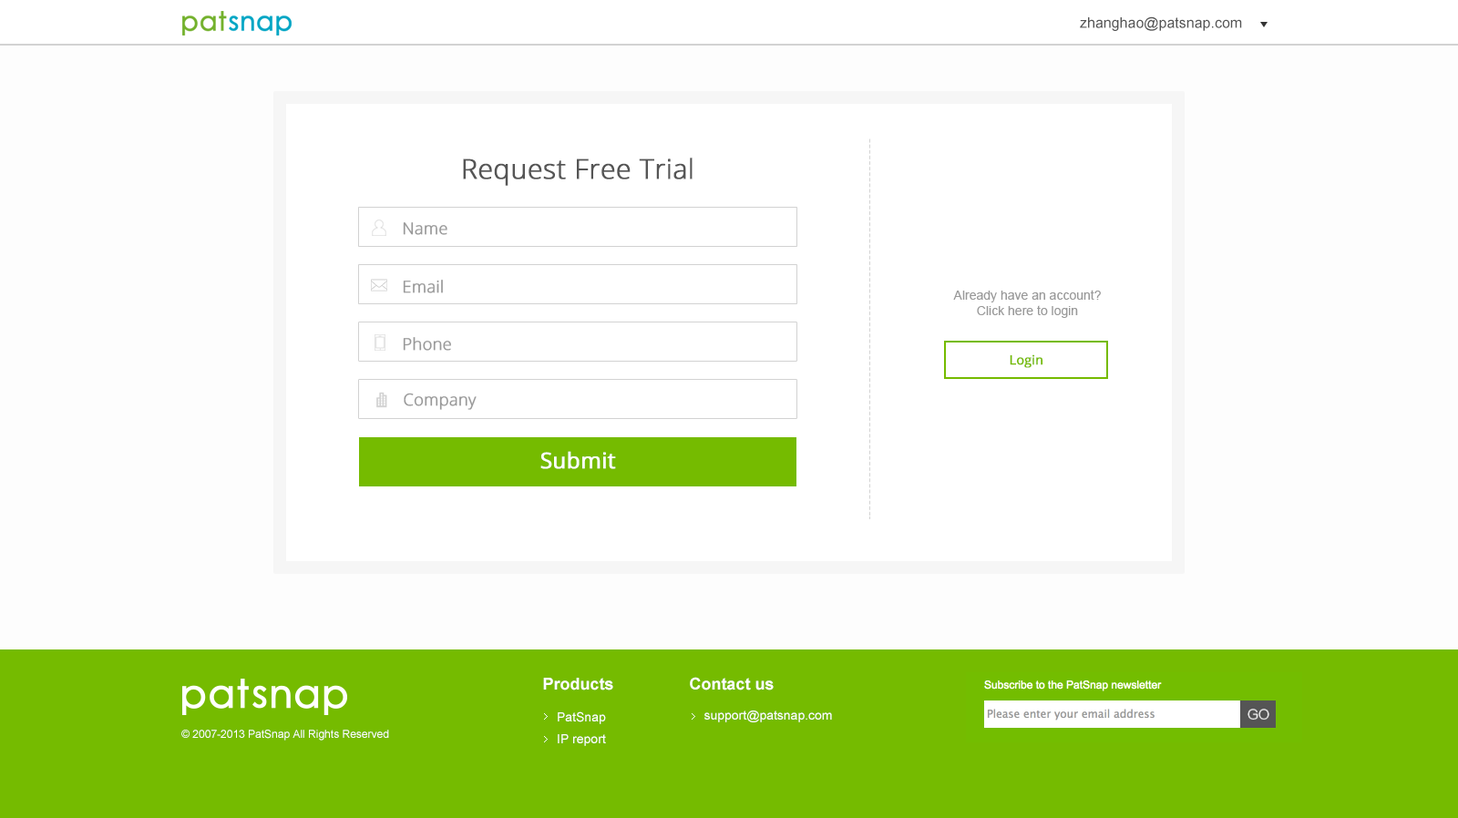
<style>
.page{position:relative;width:1458px;height:818px;background:#fdfdfd}
.page>*{position:absolute;margin:0}
.t1{font:14.6px "ArialMT";color:#555555}
.t2{font:27.3px "OpenSans-Light";color:#555555;font-weight:bold}
.t3{font:16.4px "OpenSans-Light";color:#999999;font-weight:bold}
.t4{font:12.8px "ArialMT";color:#999999}
.t5{font:12.8px "OpenSans";color:#75bb00;font-weight:bold}
.t6{font:21.9px "OpenSans";color:#ffffff;font-weight:bold}
.t7{font:16.4px "Arial-BoldMT";color:#ffffff}
.t8{font:12.8px/3.6px "ArialMT";color:#ffffff}
.t9{font:12.8px "ArialMT";color:#ffffff}
.t10{font:10.9px "ArialMT";color:#ffffff}
</style>
<div class="page">
<p class="t1" style="left:1080px;top:16px;width:162px;height:15px">zhanghao@patsnap.com</p>
<p class="t2" style="left:463px;top:158px;width:229px;height:28px">Request Free Trial</p>
<p class="t3" style="left:403px;top:222px;width:44px;height:13px">Name</p>
<p class="t3" style="left:403px;top:280px;width:40px;height:13px">Email</p>
<p class="t4" style="left:953px;top:290px;width:147px;height:28px;text-align:center">Already have an account?<br>Click here to login</p>
<p class="t3" style="left:403px;top:337px;width:48px;height:14px">Phone</p>
<p class="t5" style="left:1009px;top:354px;width:34px;height:14px">Login</p>
<p class="t3" style="left:404px;top:393px;width:72px;height:17px">Company</p>
<p class="t6" style="left:540px;top:451px;width:76px;height:18px">Submit</p>
<p class="t7" style="left:543px;top:678px;width:70px;height:13px">Products</p>
<p class="t7" style="left:690px;top:677px;width:83px;height:14px">Contact us</p>
<p class="t8" style="left:558px;top:711px;width:48px;height:35px">PatSnap    <br>IP report</p>
<p class="t9" style="left:704px;top:711px;width:128px;height:11px">support@patsnap.com</p>
<p class="t10" style="left:181px;top:730px;width:208px;height:11px">© 2007-2013 PatSnap All Rights Reserved</p>
</div>
